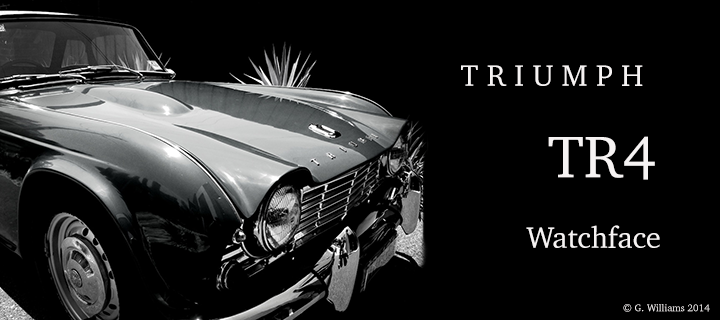
<style>
.page{position:relative;width:720px;height:320px;background:#000000}
.page>*{position:absolute;margin:0}
.t1{font:30px "Charter-Roman";color:#f6f3f3}
.t2{font:60px "Charter-Roman";color:#f6f3f3}
.t3{font:10px "Charter-Roman";color:#f6f3f3}
</style>
<div class="page">
<p class="t1" style="left:461px;top:65px;width:182px;height:21px">T R I U M P H</p>
<p class="t2" style="left:548px;top:136px;width:107px;height:44px">TR4</p>
<p class="t1" style="left:526px;top:225px;width:134px;height:23px">Watchface</p>
<p class="t3" style="left:623px;top:304px;width:87px;height:8px">© G. Williams 2014</p>
</div>
